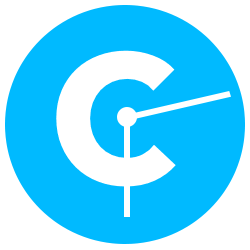
<style>
.page{position:relative;width:250px;height:250px;background:#00baff}
.page>*{position:absolute;margin:0}
.t1{font:182px "AvenirNext-Bold";letter-spacing:0.004em;color:#ffffff}
</style>
<div class="page">
<p class="t1" style="left:56px;top:50px;width:120px;height:137px">C</p>
</div>
